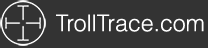
<style>
.page{position:relative;width:208px;height:48px;background:#333333}
.page>*{position:absolute;margin:0}
.t1{font:23px "HelveticaLTStd-Light";color:#ffffff}
</style>
<div class="page">
<p class="t1" style="left:56px;top:14px;width:148px;height:18px">TrollTrace.com</p>
</div>
